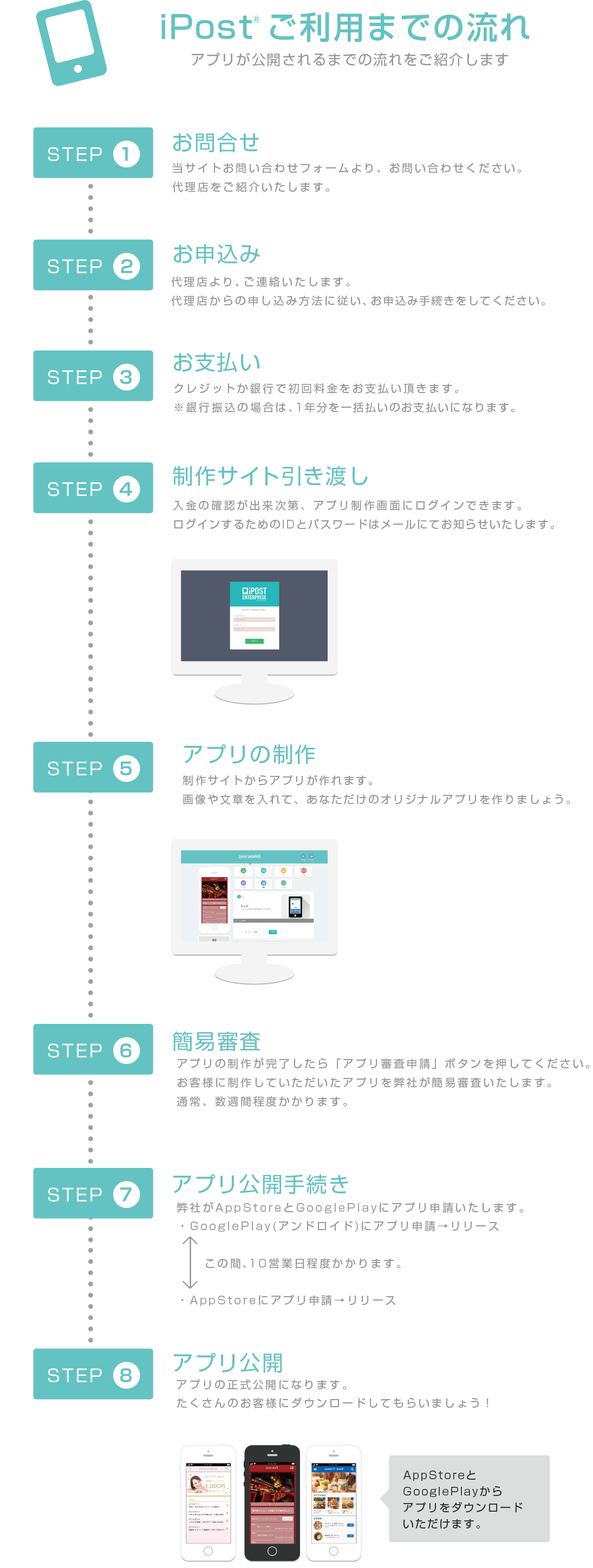
<style>
.page{position:relative;width:593px;height:1568px;background:#ffffff}
.page>*{position:absolute;margin:0}
.t1{font:31.4px "ShinGoPr5-Medium";letter-spacing:0.06em;color:#63c3c2}
.t2{font:14.1px "ShinGoPr5-Regular";letter-spacing:0.08em;color:#999999}
.t3{font:21.1px "ShinGoPr5-Regular";letter-spacing:0.06em;color:#63c3c2}
.t4{font:10.8px "ShinGoPr5-Regular";letter-spacing:0.18em;color:#999999}
.t5{font:10.8px "ShinGoPr5-Regular";letter-spacing:0.12em;color:#999999}
.t6{font:21.2px "ShinGoPr5-Regular";letter-spacing:0.06em;color:#63c3c2}
.t7{font:10.8px "ShinGoPr5-Regular";letter-spacing:0.14em;color:#999999}
.t8{font:10.8px/18.5px "ShinGoPr5-Regular";letter-spacing:0.18em;color:#999999}
.t9{font:10.8px/16.2px "ShinGoPr5-Regular";letter-spacing:0.12em;color:#363636}
</style>
<div class="page">
<p class="t1" style="left:161px;top:12px;width:369px;height:30px">iPost ご利用までの流れ</p>
<p class="t2" style="left:192px;top:53px;width:316px;height:14px">アプリが公開されるまでの流れをご紹介します</p>
<p class="t3" style="left:173px;top:132px;width:86px;height:21px">お問合せ</p>
<p class="t4" style="left:172px;top:162px;width:349px;height:30px">当サイトお問い合わせフォームより、お問い合わせください。<br>代理店をご紹介いたします。</p>
<p class="t3" style="left:174px;top:244px;width:86px;height:20px">お申込み</p>
<p class="t4" style="left:171px;top:276px;width:374px;height:30px">代理店より、ご連絡いたします。<br>代理店からの申し込み方法に従<span class="t5">い、お申込み手続きをしてください。</span></p>
<p class="t3" style="left:174px;top:352px;width:85px;height:20px">お支払い</p>
<p class="t4" style="left:174px;top:383px;width:340px;height:30px">クレジットか銀行で初回料金をお支払い頂きます。<br>※銀行振込の場合は、<span class="t5">1年分を一括払いのお支払いになります。</span></p>
<p class="t6" style="left:173px;top:466px;width:195px;height:20px">制作サイト引き渡し</p>
<p class="t5" style="left:173px;top:500px;width:381px;height:30px"><span class="t4">入金の確認が出来次第、アプリ制作画面にログインできます。<br></span>ログインするためのIDとパスワードはメールにてお知らせいたします。</p>
<p class="t3" style="left:184px;top:744px;width:131px;height:21px">アプリの制作</p>
<p class="t7" style="left:182px;top:775px;width:388px;height:30px">制作サイトからアプリが作れます。<br>画像や文章を入れて、あなただけのオリジナルアプリを作りましょう。</p>
<p class="t3" style="left:172px;top:1031px;width:88px;height:20px">簡易審査</p>
<p class="t4" style="left:177px;top:1058px;width:413px;height:49px">アプリの制作が完了したら「アプリ審査申請」ボタンを押してください。<br>お客様に制作していただいたアプリを弊社が簡易審査いたします。<br>通常、数週間程度かかります。</p>
<p class="t6" style="left:173px;top:1174px;width:175px;height:20px">アプリ公開手続き</p>
<p class="t8" style="left:177px;top:1202px;width:346px;height:104px">弊社がAppStoreとGooglePlayにアプリ申請いたします。<br>・GooglePlay(アンドロイド)にアプリ申請→リリース<br><br>     この間、10営業日程度かかります。<br><br>・AppStoreにアプリ申請→リリース</p>
<p class="t6" style="left:173px;top:1353px;width:109px;height:20px">アプリ公開</p>
<p class="t8" style="left:177px;top:1379px;width:311px;height:29px">アプリの正式公開になります。<br>たくさんのお客様にダウンロードしてもらいましょう！</p>
<p class="t9" style="left:403px;top:1470px;width:119px;height:59px">AppStoreと<br>GooglePlayから<br>アプリをダウンロード<br>いただけます。</p>
</div>
